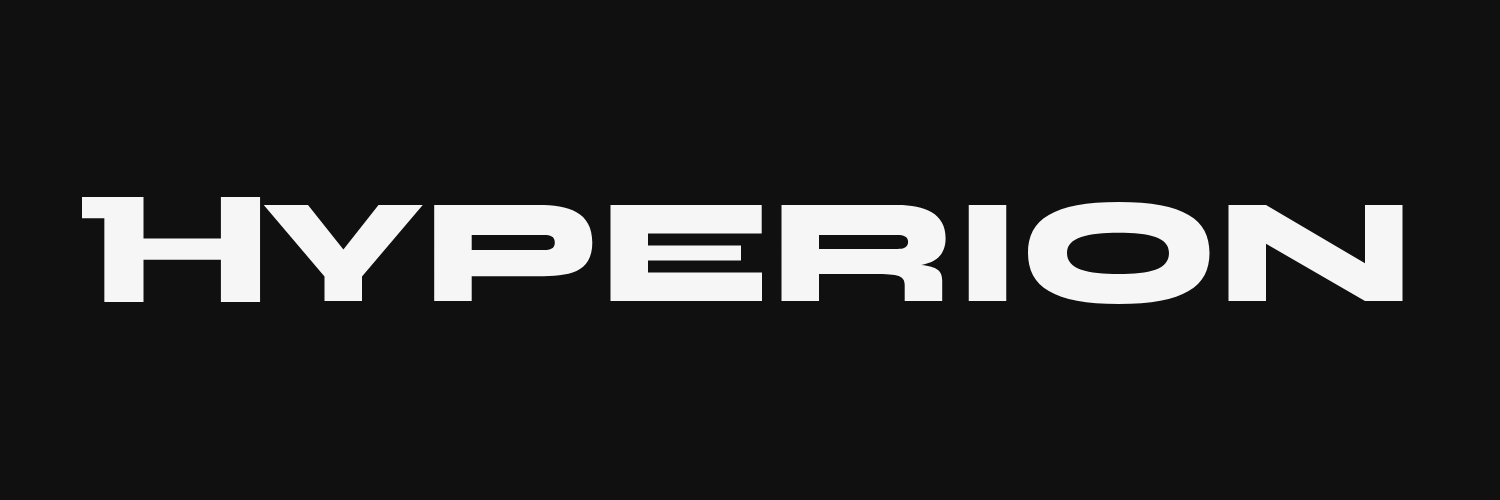
<style>
.page{position:relative;width:1500px;height:500px;background:#101010}
.page>*{position:absolute;margin:0}
.t1{font:150px "StalinistOne-Regular";color:#f6f6f6}
.t2{font:150px "Syne-Extra";color:#f6f6f6}
</style>
<div class="page">
<p class="t1" style="left:82px;top:197px;width:179px;height:105px">H</p>
<p class="t2" style="left:263px;top:202px;width:1140px;height:102px"><span class="t1">   </span>YPERION</p>
</div>
